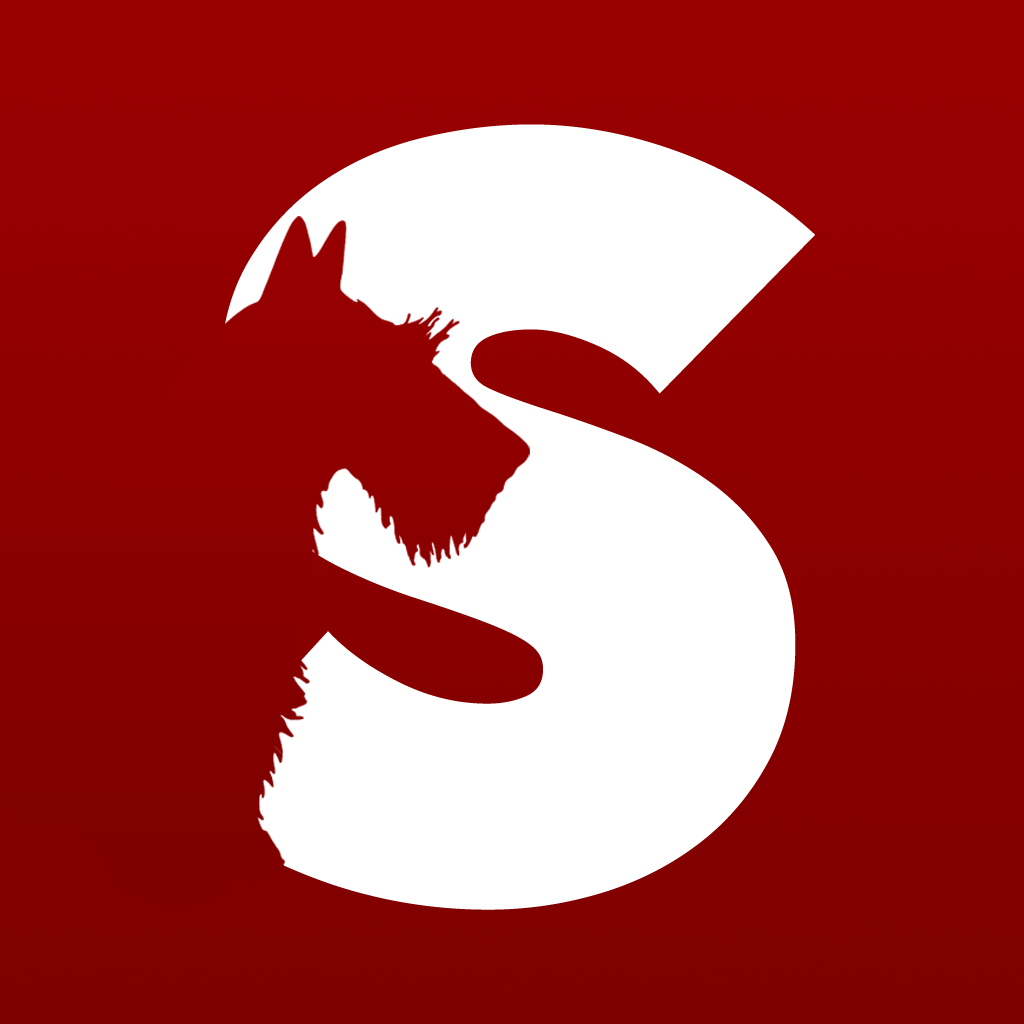
<style>
.page{position:relative;width:1024px;height:1024px;background:#ffffff}
.page>*{position:absolute;margin:0}
.t1{font:1049.5px "AvenirNext-Heavy";color:#ffffff}
</style>
<div class="page">
<p class="t1" style="left:175px;top:124px;width:640px;height:786px">S</p>
</div>
